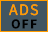
<style>
.page{position:relative;width:48px;height:32px;background:#415561}
.page>*{position:absolute;margin:0}
.t1{font:16px "SourceSansRoman-Regular";letter-spacing:0.08em;color:#ff9c00}
.t2{font:14px "SourceSansRoman-Bold";letter-spacing:0.08em;color:#000000}
</style>
<div class="page">
<p class="t1" style="left:9px;top:4px;width:29px;height:12px">ADS</p>
<p class="t2" style="left:11px;top:19px;width:26px;height:10px">OFF</p>
</div>
